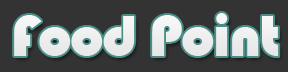
<style>
.page{position:relative;width:288px;height:72px;background:#333333}
.page>*{position:absolute;margin:0}
.t1{font:60px "Bauhaus93";letter-spacing:-0.025em;color:#ffffff}
</style>
<div class="page">
<p class="t1" style="left:14px;top:13px;width:265px;height:44px">Food Point</p>
</div>
